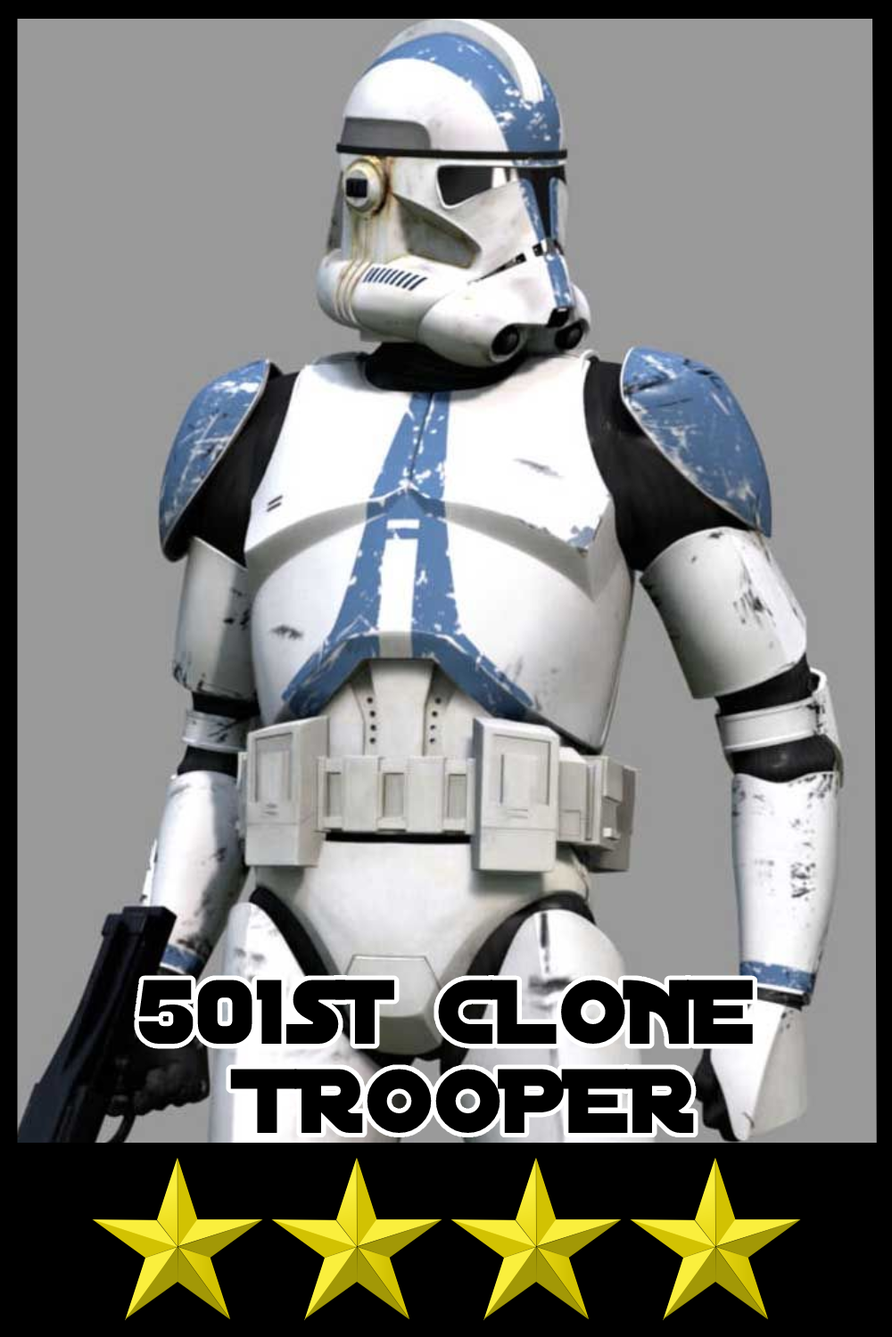
<style>
.page{position:relative;width:892px;height:1337px;background:#9a9a9a}
.page>*{position:absolute;margin:0}
.t1{font:98.1px/89.2px "DistantGalaxy";color:#000000}
</style>
<div class="page">
<p class="t1" style="left:138px;top:980px;width:615px;height:153px;text-align:center">501st CLONE <br>TROOPER</p>
</div>
